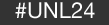
<style>
.page{position:relative;width:109px;height:25px;background:#333333}
.page>*{position:absolute;margin:0}
.t1{font:22px "HelveticaNeue";color:#ffffff}
</style>
<div class="page">
<p class="t1" style="left:15px;top:2px;width:80px;height:17px">#UNL24</p>
</div>
